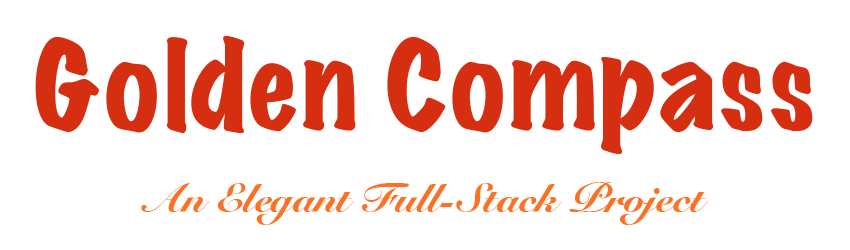
<style>
.page{position:relative;width:850px;height:250px;background:#ffffff}
.page>*{position:absolute;margin:0}
.t1{font:26.7px "MarkerFelt-Wide";color:#d52e10}
.t2{font:9.5px "SnellRoundhand-Black";color:#fa7225}
</style>
<div class="page">
<p class="t1" style="left:35px;top:36px;width:778px;height:118px">Golden Compass</p>
<p class="t2" style="left:141px;top:182px;width:568px;height:43px">An Elegant Full-Stack Project</p>
</div>
